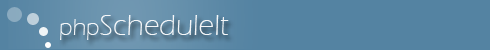
<style>
.page{position:relative;width:490px;height:50px;background:#5483a2}
.page>*{position:absolute;margin:0}
.t1{font:30px "ErasITC-Light";color:#f5f7f9}
.t2{font:24px "ErasITC-Light";color:#f5f7f9}
</style>
<div class="page">
<p class="t1" style="left:60px;top:15px;width:169px;height:25px"><span class="t2">php</span>ScheduleIt</p>
</div>
